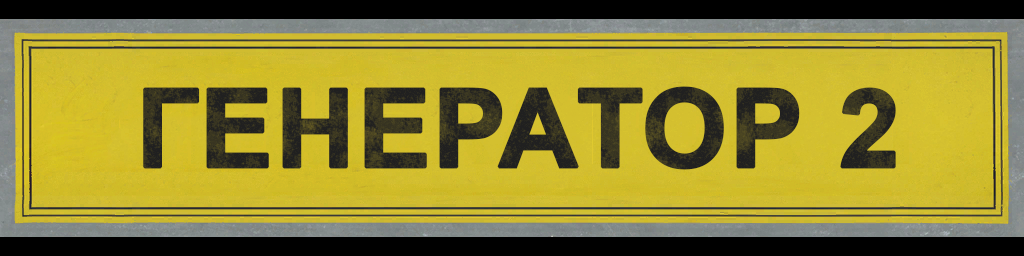
<style>
.page{position:relative;width:1024px;height:256px}
.page>*{position:absolute;margin:0}
.t1{font:109px "Arial-BoldMT";color:#202020;font-weight:bold}
</style>
<div class="page">
<p class="t1" style="left:143px;top:86px;width:753px;height:84px">ГЕНЕРАТОР 2</p>
</div>
